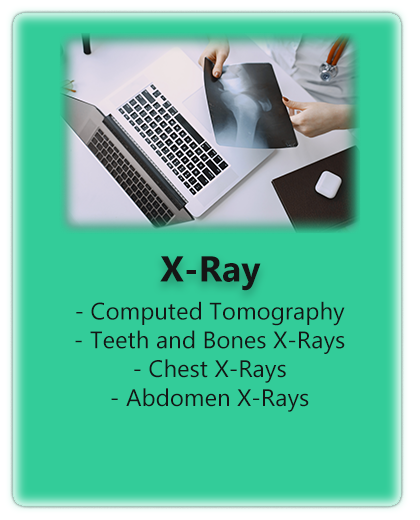
<style>
.page{position:relative;width:420px;height:520px;background:#33cc99}
.page>*{position:absolute;margin:0}
.t1{font:36px "Gadugi-Bold";color:#151515}
.t2{font:24px "Gadugi";color:#151515}
</style>
<div class="page">
<p class="t1" style="left:160px;top:256px;width:101px;height:35px">X-Ray</p>
<p class="t2" style="left:75px;top:301px;width:270px;height:111px;text-align:center">- Computed Tomography<br>- Teeth and Bones X-Rays<br>- Chest X-Rays<br>- Abdomen X-Rays</p>
</div>
